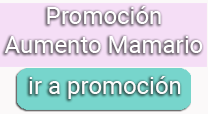
<style>
.page{position:relative;width:208px;height:114px;background:#f5def6}
.page>*{position:absolute;margin:0}
.t1{font:24px "Roboto-Regular";color:#ffffff}
.t2{font:24px "Roboto-Regular";color:#fbfcfc}
</style>
<div class="page">
<p class="t1" style="left:4px;top:6px;width:199px;height:47px;text-align:center">Promoción<br>Aumento Mamario</p>
<p class="t2" style="left:29px;top:76px;width:152px;height:23px">ir a promoción</p>
</div>
